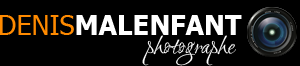
<style>
.page{position:relative;width:300px;height:66px;background:#000000}
.page>*{position:absolute;margin:0}
.t1{font:27px "Tahoma-Bold";color:#ffffff}
.t2{font:27px "Tahoma";color:#ff8a00}
.t3{font:27px "Ruthie-Regular";color:#ffffff}
</style>
<div class="page">
<p class="t1" style="left:0px;top:15px;width:242px;height:20px"><span class="t2">DENIS</span>MALENFANT</p>
<p class="t3" style="left:142px;top:35px;width:94px;height:31px">photographe</p>
</div>
